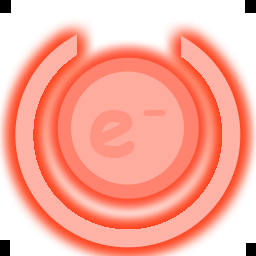
<style>
.page{position:relative;width:256px;height:256px;background:#ffffff}
.page>*{position:absolute;margin:0}
.t1{font:89.7px "ComicSansMS-Bold";color:#ff9483}
.t2{font:89.7px "ComicSansMS-Bold";color:#ff9483;font-weight:bold}
</style>
<div class="page">
<p class="t1" style="left:90px;top:110px;width:76px;height:48px">e<span class="t2">-</span></p>
</div>
